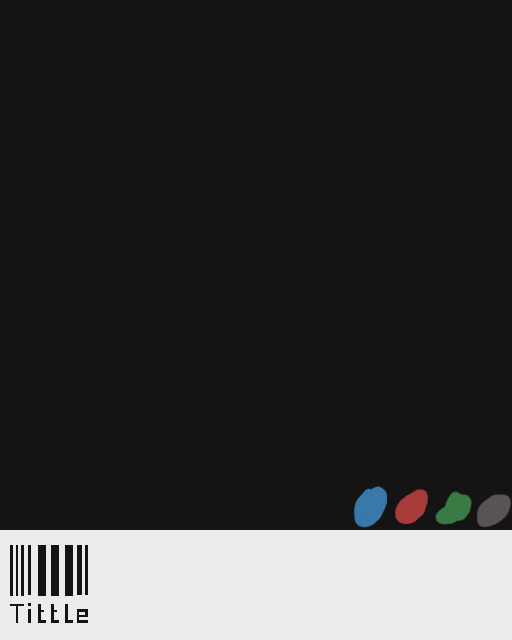
<style>
.page{position:relative;width:512px;height:640px;background:#141414}
.page>*{position:absolute;margin:0}
.t1{font:72px "Paskowy";color:#141414}
</style>
<div class="page">
<p class="t1" style="left:10px;top:545px;width:78px;height:78px">Tittle</p>
</div>
